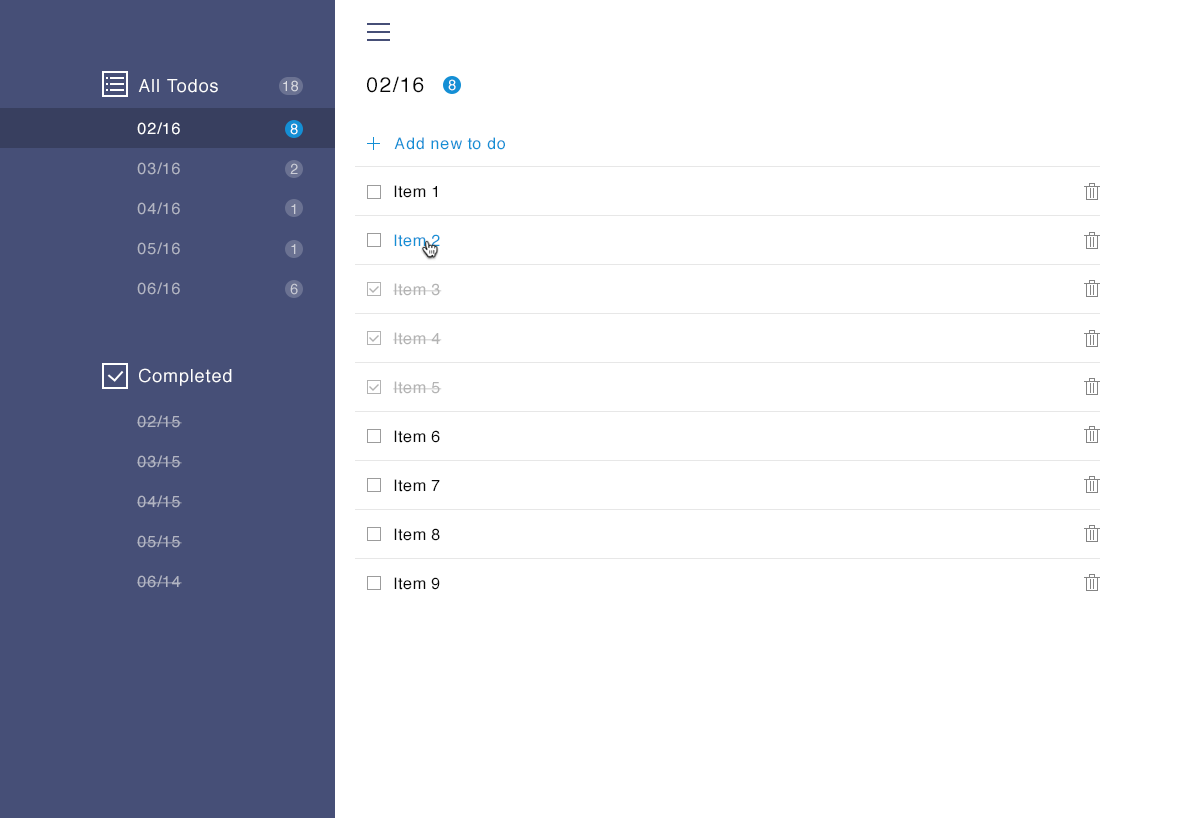
<style>
.page{position:relative;width:1200px;height:818px;background:#ffffff}
.page>*{position:absolute;margin:0}
.t1{font:21px "Helvetica";letter-spacing:0.05em;color:#050505}
.t2{font:18px "Helvetica";letter-spacing:0.05em;color:#ffffff}
.t3{font:14px "Helvetica";letter-spacing:0.05em;color:#dadbe2}
.t4{font:14px "Helvetica";letter-spacing:0.05em;color:#ffffff}
.t5{font:16px "Helvetica";letter-spacing:0.05em;color:#ffffff}
.t6{font:14px/40px "Helvetica";letter-spacing:0.05em;color:#ccced8}
.t7{font:16px "Helvetica";letter-spacing:0.05em;color:#148fd5}
.t8{font:16px/40px "Helvetica";letter-spacing:0.05em;color:#b2b5c3}
.t9{font:16px/49px "Helvetica";letter-spacing:0.05em;color:#060606}
.t10{font:16px/49px "Helvetica";letter-spacing:0.05em;color:#148fd5}
.t11{font:16px/49px "Helvetica";letter-spacing:0.05em;color:#b3b3b3}
</style>
<div class="page">
<p class="t1" style="left:367px;top:76px;width:57px;height:17px">02/16</p>
<p class="t2" style="left:138px;top:79px;width:80px;height:14px">All Todos</p>
<p class="t3" style="left:283px;top:80px;width:15px;height:12px">18</p>
<p class="t4" style="left:448px;top:79px;width:8px;height:12px">8</p>
<p class="t5" style="left:137px;top:122px;width:43px;height:13px">02/16</p>
<p class="t6" style="left:290px;top:123px;width:8px;height:172px;text-align:center">8<br>2<br>1<br>1<br>6</p>
<p class="t4" style="left:290px;top:123px;width:8px;height:12px">8</p>
<p class="t7" style="left:394px;top:137px;width:111px;height:13px">Add new to do</p>
<p class="t8" style="left:137px;top:162px;width:43px;height:133px">03/16<br>04/16<br>05/16<br>06/16</p>
<p class="t9" style="left:393px;top:185px;width:49px;height:405px">Item 1<br><span class="t10">Item 2<br></span><span class="t11">Item 3<br>Item 4<br>Item 5<br></span>Item 6<br>Item 7<br>Item 8<br>Item 9</p>
<p class="t2" style="left:139px;top:368px;width:93px;height:18px">Completed</p>
<p class="t8" style="left:137px;top:415px;width:45px;height:173px">02/15<br>03/15<br>04/15<br>05/15<br>06/14</p>
</div>
